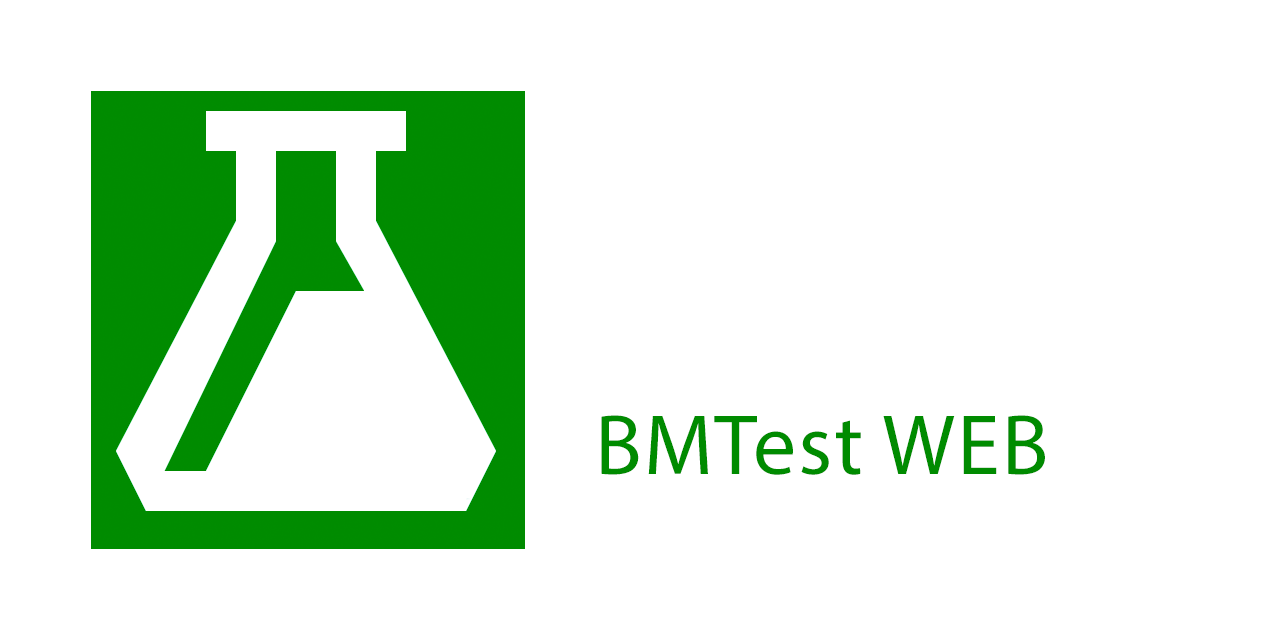
<style>
.page{position:relative;width:1280px;height:640px;background:#ffffff}
.page>*{position:absolute;margin:0}
.t1{font:86px "MyriadPro-Regular";letter-spacing:0.025em;color:#008c00}
</style>
<div class="page">
<p class="t1" style="left:601px;top:415px;width:444px;height:60px">BMTest WEB</p>
</div>
